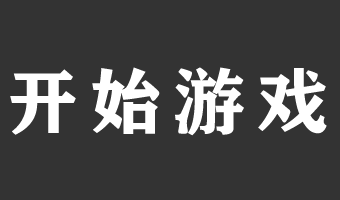
<style>
.page{position:relative;width:340px;height:200px;background:#333333}
.page>*{position:absolute;margin:0}
.t1{font:72px "FZCHSJW--GB1-0";letter-spacing:0.16em;color:#ffffff}
</style>
<div class="page">
<p class="t1" style="left:10px;top:67px;width:317px;height:69px">开始游戏</p>
</div>
